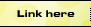
<style>
.page{position:relative;width:91px;height:27px}
.page>*{position:absolute;margin:0}
.t1{font:10px "MicrogrammaD-BoldExte";letter-spacing:0.05em;color:#000000}
</style>
<div class="page">
<p class="t1" style="left:17px;top:10px;width:58px;height:7px">Link here</p>
</div>
